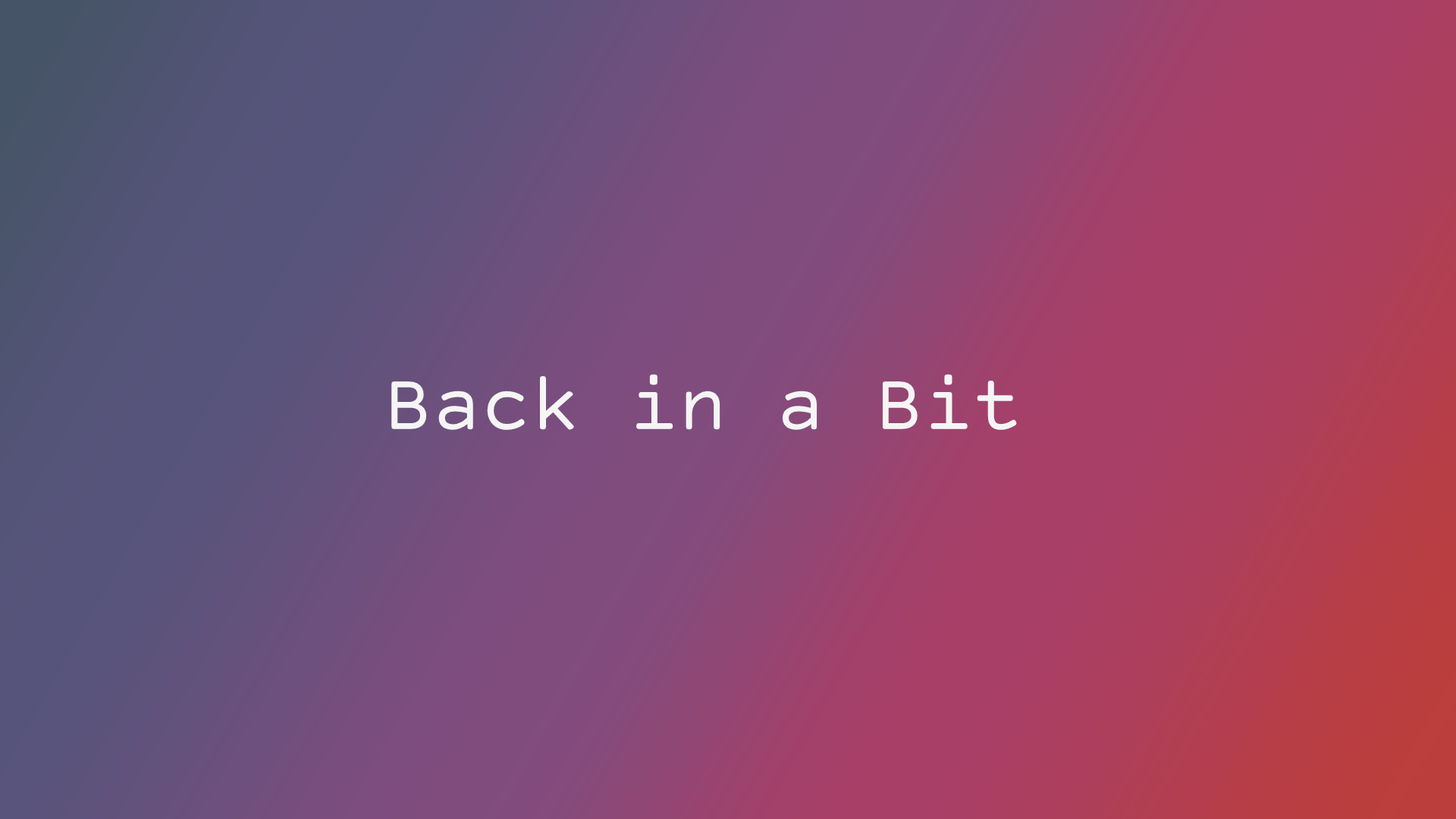
<style>
.page{position:relative;width:1456px;height:819px}
.page>*{position:absolute;margin:0}
.t1{font:81.9px "CourierPrimeCode-Regular";color:#f5f5f5}
</style>
<div class="page">
<p class="t1" style="left:391px;top:374px;width:626px;height:56px">Back in a Bit</p>
</div>
